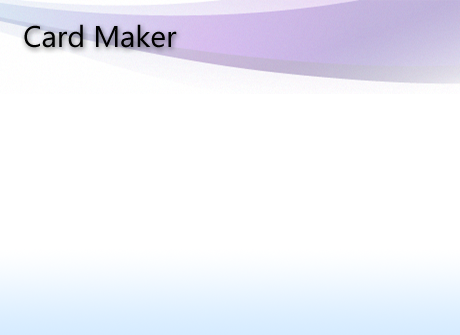
<style>
.page{position:relative;width:460px;height:335px;background:#ffffff}
.page>*{position:absolute;margin:0}
.t1{font:30px "KhmerUI";color:#000000}
</style>
<div class="page">
<p class="t1" style="left:24px;top:24px;width:153px;height:24px">Card Maker</p>
</div>
